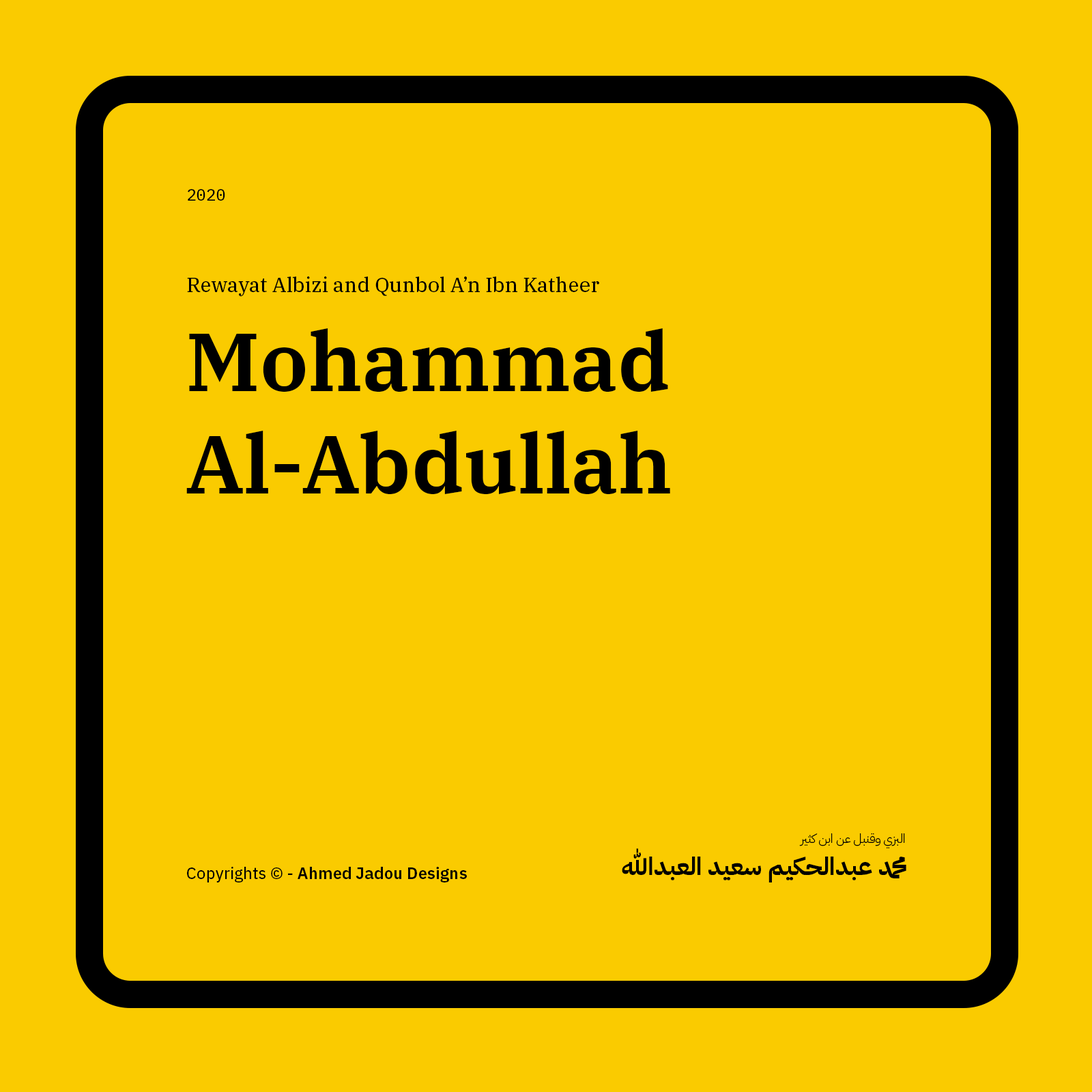
<style>
.page{position:relative;width:1092px;height:1092px;background:#facb00}
.page>*{position:absolute;margin:0}
.t1{font:16.4px "IBMPlexMono-Text";color:#000000}
.t2{font:20.5px "IBMPlexSerif-Text";color:#000000}
.t3{font:81.9px/102.7px "IBMPlexSerif-SemiBold";color:#000000}
.t4{font:12.3px "IBMPlexArabic-Light";color:#000000}
.t5{font:24.6px "IBMPlexArabic-Bold";color:#000000}
.t6{font:16.4px "IBMPlexSans-SemiBold";color:#000000}
.t7{font:16.4px "IBMPlexSans-Text";color:#000000}
</style>
<div class="page">
<p class="t1" style="left:188px;top:189px;width:37px;height:12px">2020</p>
<p class="t2" style="left:187px;top:276px;width:412px;height:20px">Rewayat Albizi and Qunbol A’n Ibn Katheer</p>
<p class="t3" style="left:186px;top:328px;width:484px;height:166px">Mohammad Al-Abdullah</p>
<p class="t4" style="left:799px;top:833px;width:106px;height:15px">البزي وقنبل عن ابن كثير</p>
<p class="t5" style="left:622px;top:848px;width:284px;height:34px">محمد عبدالحكيم سعيد العبدالله</p>
<p class="t6" style="left:187px;top:867px;width:280px;height:15px"><span class="t7">Copyrights © - </span>Ahmed Jadou Designs</p>
</div>
